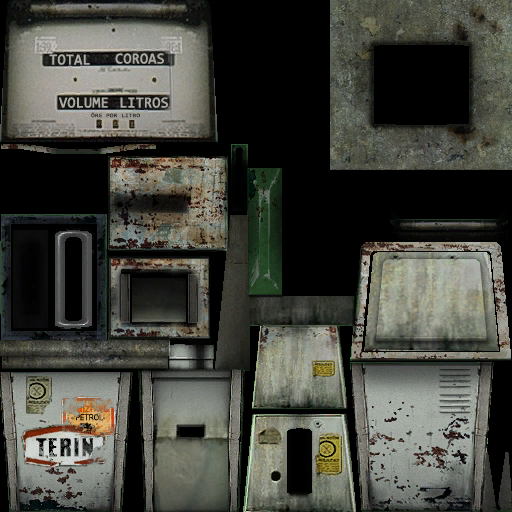
<style>
.page{position:relative;width:512px;height:512px;background:#000000}
.page>*{position:absolute;margin:0}
.t1{font:15.2px "Consolas";color:#ada9a3;text-transform:uppercase;font-weight:bold;scale:0.95 1}
.t2{font:15.2px "Consolas";color:#aba8a3;text-transform:uppercase;font-weight:bold;scale:0.95 1}
.t3{font:5.3px "Consolas";color:#221e18;text-transform:uppercase;font-weight:bold;scale:1.23 1}
</style>
<div class="page">
<p class="t1" style="left:49px;top:54px;width:41px;height:11px">total</p>
<p class="t2" style="left:115px;top:53px;width:49px;height:11px">coroas</p>
<p class="t2" style="left:59px;top:97px;width:49px;height:11px">volume</p>
<p class="t2" style="left:120px;top:97px;width:48px;height:11px">litros</p>
<p class="t3" style="left:91px;top:112px;width:49px;height:6px">Öre por Litro</p>
</div>
